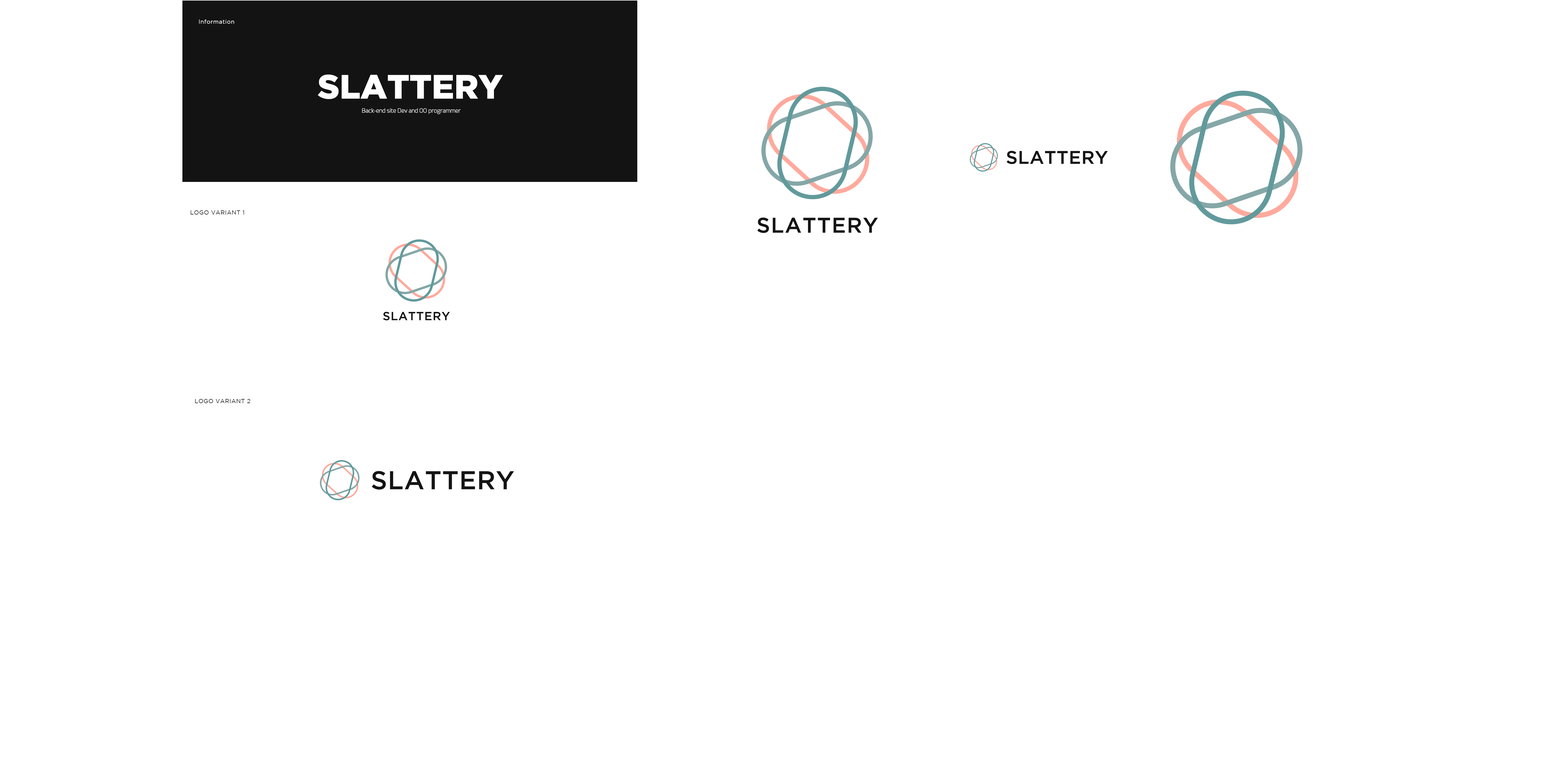
<style>
.page{position:relative;width:1568px;height:760px;background:#ffffff}
.page>*{position:absolute;margin:0}
.t1{font:5.8px "GothamBook";letter-spacing:0.04em;color:#ffffff}
.t2{font:33.7px "GothamBlack";color:#ffffff}
.t3{font:5.8px "Esphimere-Light";color:#ffffff}
.t4{font:18.2px "GothamMedium";letter-spacing:0.02em;color:#141414}
.t5{font:5.8px "GothamBook";letter-spacing:0.04em;color:#1b1b1b}
.t6{font:21.2px "GothamMedium";letter-spacing:0.04em;color:#141414}
.t7{font:11.8px "GothamMedium";letter-spacing:0.04em;color:#141414}
.t8{font:25.7px "GothamMedium";letter-spacing:0.02em;color:#141414}
</style>
<div class="page">
<p class="t1" style="left:199px;top:20px;width:35px;height:4px">Information</p>
<p class="t2" style="left:318px;top:74px;width:185px;height:25px">SLATTERY</p>
<p class="t3" style="left:362px;top:108px;width:99px;height:6px">Back-end site Dev and OO programmer</p>
<p class="t4" style="left:1007px;top:151px;width:101px;height:13px">SLATTERY</p>
<p class="t5" style="left:190px;top:210px;width:54px;height:4px">LOGO VARIANT 1</p>
<p class="t6" style="left:757px;top:217px;width:121px;height:16px">SLATTERY</p>
<p class="t7" style="left:383px;top:312px;width:67px;height:8px">SLATTERY</p>
<p class="t5" style="left:195px;top:399px;width:55px;height:4px">LOGO VARIANT 2</p>
<p class="t8" style="left:372px;top:471px;width:142px;height:18px">SLATTERY</p>
</div>
